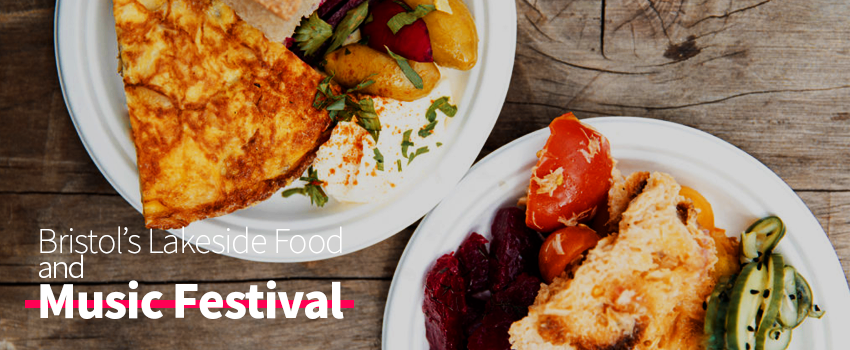
<style>
.page{position:relative;width:850px;height:350px}
.page>*{position:absolute;margin:0}
.t1{font:33px/65px "NotoSansKR-Thin";letter-spacing:-0.03em;color:#ffffff}
.t2{font:45.1px/65px "NotoSansKR-Black";letter-spacing:-0.02em;color:#ffffff}
.t3{font:30px "NotoSansKR-Light";letter-spacing:-0.06em;color:#ffffff}
</style>
<div class="page">
<p class="t1" style="left:40px;top:226px;width:304px;height:93px">Bristol’s Lakeside Food<br><span class="t2">Music Festival</span></p>
<p class="t3" style="left:39px;top:254px;width:44px;height:24px">and</p>
</div>
